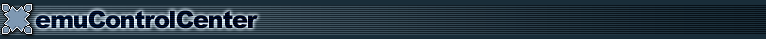
<style>
.page{position:relative;width:766px;height:39px;background:#192d39}
.page>*{position:absolute;margin:0}
.t1{font:24px "Arial-Black";letter-spacing:-0.05em}
</style>
<div class="page">
<p class="t1" style="left:35px;top:10px;width:223px;height:19px">emuControlCenter</p>
</div>
